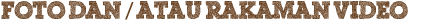
<style>
.page{position:relative;width:432px;height:21px;background:#ffffff}
.page>*{position:absolute;margin:0}
.t1{font:24px "ScribbleBoxDEMO";color:#684121}
.t2{font:24px "MyriadPro-Regular";color:#684121}
</style>
<div class="page">
<p class="t1" style="left:1px;top:0px;width:407px;height:20px">Foto dan <span class="t2">/</span> atau Rakaman Video</p>
</div>
